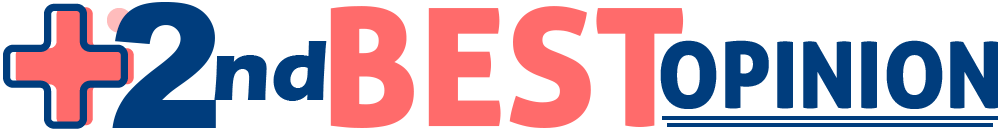
<style>
.page{position:relative;width:1000px;height:132px;background:#ffffff}
.page>*{position:absolute;margin:0}
.t1{font:173.2px "Arial-Black";letter-spacing:0.22em;color:#003d7d}
.t2{font:163.9px "AllerDisplay";color:#ff6b6b}
.t3{font:88.5px "ErasITC-Bold";color:#003d7d}
.t4{font:92.1px "AllerDisplay";color:#003d7d;scale:0.96 1}
</style>
<div class="page">
<p class="t1" style="left:112px;top:2px;width:104px;height:126px">2</p>
<p class="t2" style="left:330px;top:6px;width:354px;height:122px">BEST</p>
<p class="t3" style="left:214px;top:41px;width:113px;height:60px">nd</p>
<p class="t4" style="left:660px;top:40px;width:338px;height:69px">OPINION</p>
</div>
